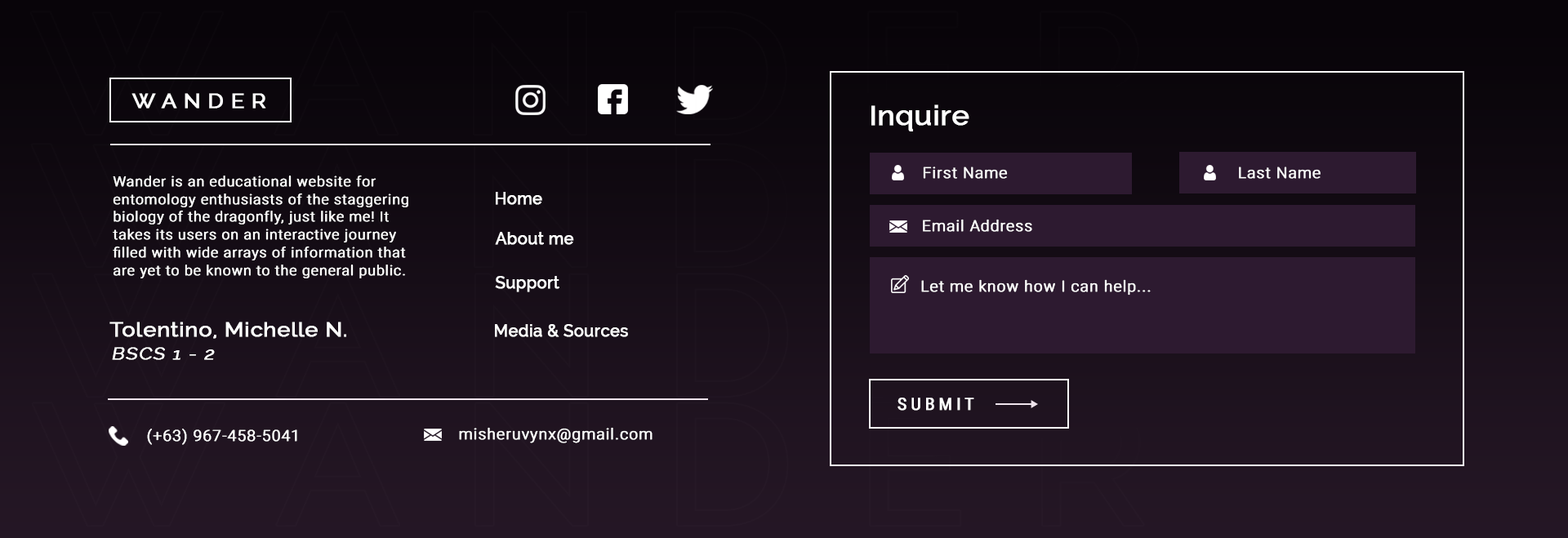
<style>
.page{position:relative;width:1568px;height:538px}
.page>*{position:absolute;margin:0}
.t1{font:20.1px "Raleway-Medium";letter-spacing:0.3em;color:#ffffff;font-weight:bold;scale:1.1 1}
.t2{font:27.6px "Raleway-Medium";color:#ffffff;font-weight:bold;scale:1.06 1}
.t3{font:15.2px "RobotoCondensed-Light";letter-spacing:0.01em;color:#ffffff;font-weight:bold;scale:1.21 1}
.t4{font:13.9px/17.9px "RobotoCondensed-Light";letter-spacing:0.01em;color:#ffffff;font-weight:bold;scale:1.21 1}
.t5{font:16px "Raleway-Medium";color:#ffffff;font-weight:bold}
.t6{font:20.1px "Raleway-Medium";letter-spacing:0.01em;color:#ffffff;font-weight:bold;scale:1.1 1}
.t7{font:17.4px "Raleway";letter-spacing:0.05em;color:#ffffff;font-weight:bold;font-style:italic;scale:1.08 1}
.t8{font:16.8px "RobotoCondensed-Regular";letter-spacing:0.2em;color:#ffffff;font-weight:bold;scale:1.06 1}
</style>
<div class="page">
<p class="t1" style="left:131px;top:93px;width:135px;height:16px">WANDER</p>
<p class="t2" style="left:871px;top:105px;width:98px;height:26px">Inquire</p>
<p class="t3" style="left:923px;top:167px;width:85px;height:12px">First Name</p>
<p class="t3" style="left:1239px;top:167px;width:82px;height:12px">Last Name</p>
<p class="t4" style="left:113px;top:175px;width:295px;height:103px">Wander is an educational website for<br>entomology enthusiasts of the staggering<br>biology of the dragonfly, just like me! It<br>takes its users on an interactive journey <br>filled with wide arrays of information that<br>are yet to be known to the general public.</p>
<p class="t5" style="left:496px;top:192px;width:46px;height:13px">Home</p>
<p class="t3" style="left:923px;top:219px;width:109px;height:13px">Email Address</p>
<p class="t5" style="left:495px;top:232px;width:79px;height:13px">About me</p>
<p class="t5" style="left:495px;top:276px;width:64px;height:16px">Support</p>
<p class="t3" style="left:921px;top:279px;width:230px;height:17px">Let me know how I can help...</p>
<p class="t6" style="left:109px;top:322px;width:237px;height:17px">Tolentino, Michelle N.</p>
<p class="t5" style="left:495px;top:324px;width:133px;height:13px">Media &amp; Sources</p>
<p class="t7" style="left:112px;top:347px;width:103px;height:13px">BSCS 1 - 2</p>
<p class="t8" style="left:898px;top:398px;width:76px;height:13px">SUBMIT</p>
<p class="t3" style="left:147px;top:429px;width:150px;height:16px">(+63) 967-458-5041</p>
<p class="t3" style="left:459px;top:427px;width:194px;height:16px">misheruvynx@gmail.com</p>
</div>
